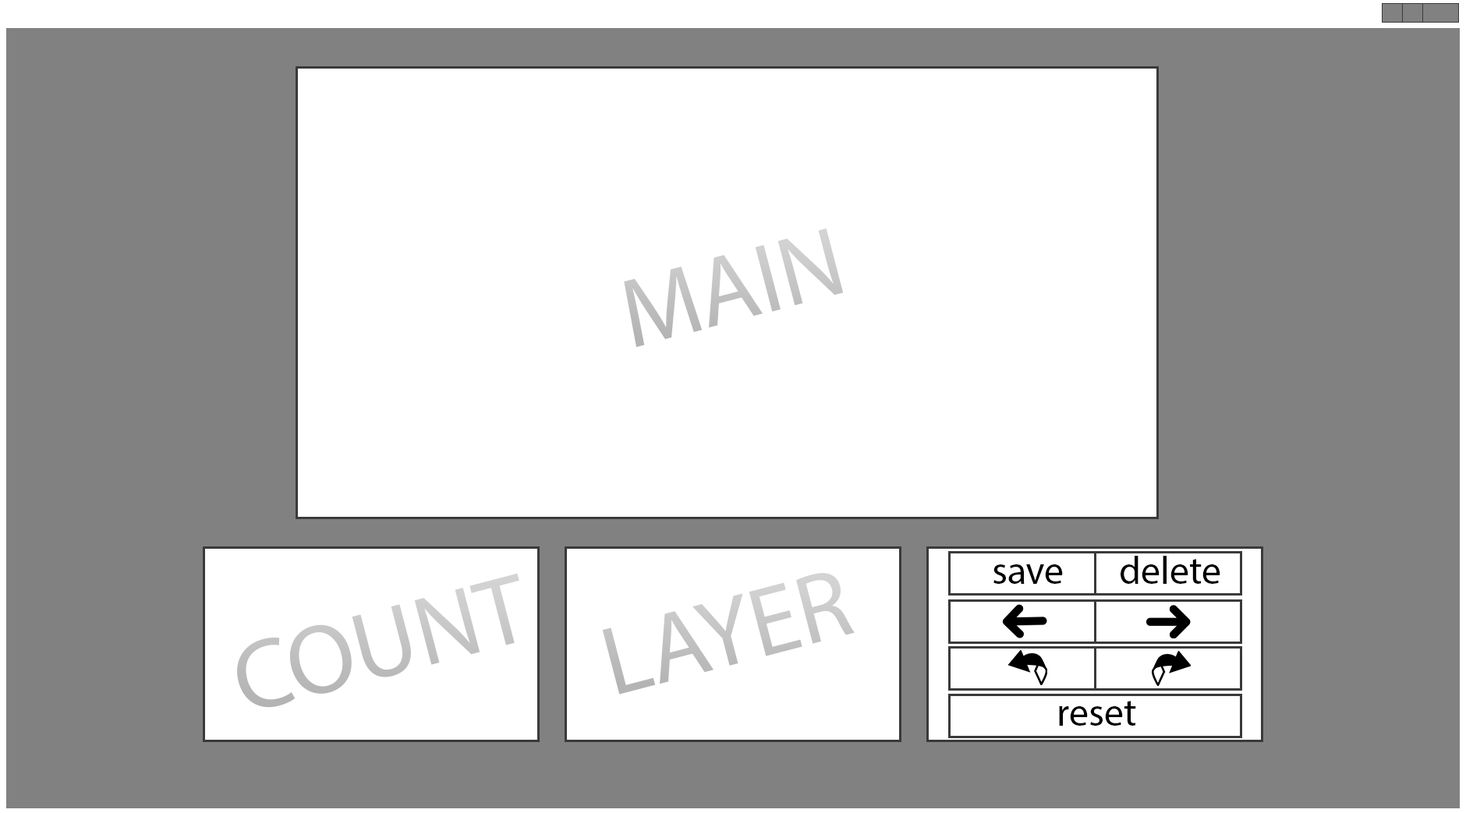
<style>
.page{position:relative;width:1466px;height:813px;background:#ffffff}
.page>*{position:absolute;margin:0}
.t1{font:98.5px "MyriadPro-Regular";color:#c3c3c3}
.t2{font:39px "MyriadPro-Regular";color:#000000}
.t3{font:98.5px "MyriadPro-Regular";color:#c5c5c5}
</style>
<div class="page">
<p class="t1" style="left:624px;top:228px;width:220px;height:120px;rotate:-15deg">MAIN</p>
<p class="t2" style="left:1121px;top:556px;width:99px;height:28px">delete</p>
<p class="t2" style="left:993px;top:565px;width:70px;height:19px">save</p>
<p class="t1" style="left:237px;top:573px;width:282px;height:135px;rotate:-15deg">COUNT</p>
<p class="t3" style="left:602px;top:573px;width:253px;height:122px;rotate:-15deg">LAYER</p>
<p class="t2" style="left:1059px;top:701px;width:77px;height:25px">reset</p>
</div>
